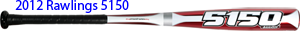
<style>
.page{position:relative;width:300px;height:31px;background:#ffffff}
.page>*{position:absolute;margin:0}
.t1{font:14px "MyriadPro-Regular";color:#0000ff}
</style>
<div class="page">
<p class="t1" style="left:15px;top:0px;width:114px;height:13px">2012 Rawlings 5150</p>
</div>
